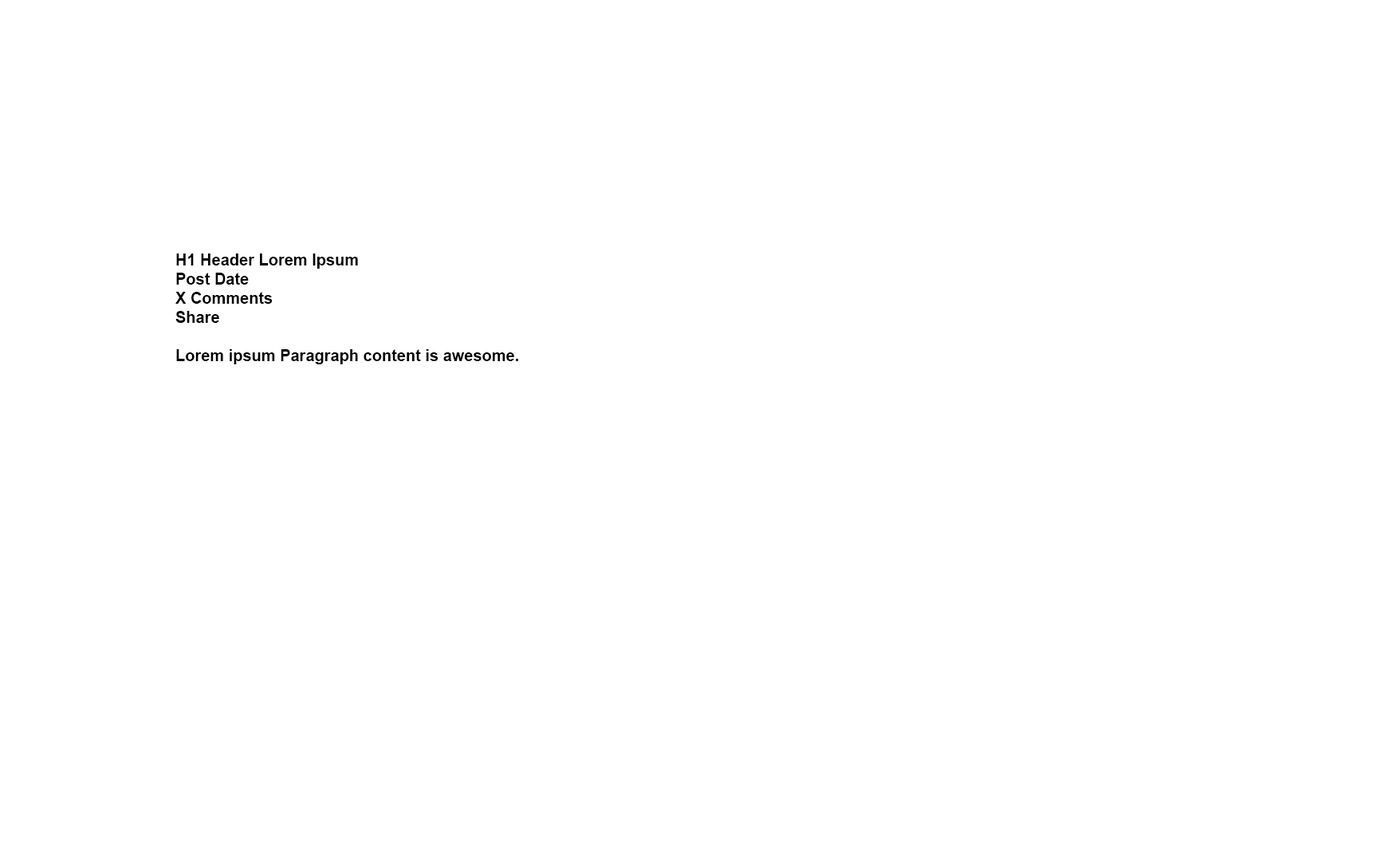
<style>
.page{position:relative;width:1384px;height:861px;background:#ffffff}
.page>*{position:absolute;margin:0}
.t1{font:15.9px "Arial-BoldMT";color:#000000}
</style>
<div class="page">
<p class="t1" style="left:175px;top:254px;width:343px;height:110px">H1 Header Lorem Ipsum<br>Post Date<br>X Comments<br>Share<br><br>Lorem ipsum Paragraph content is awesome.</p>
</div>
